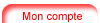
<style>
.page{position:relative;width:100px;height:23px;background:#ffffff}
.page>*{position:absolute;margin:0}
.t1{font:11px "ArialMT";color:#fe0202}
</style>
<div class="page">
<p class="t1" style="left:23px;top:12px;width:59px;height:11px">Mon compte</p>
</div>
